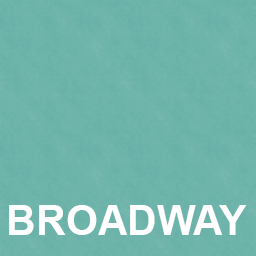
<style>
.page{position:relative;width:256px;height:256px}
.page>*{position:absolute;margin:0}
.t1{font:41px "Arial-BoldMT";color:#ffffff}
</style>
<div class="page">
<p class="t1" style="left:9px;top:205px;width:238px;height:30px">BROADWAY</p>
</div>
